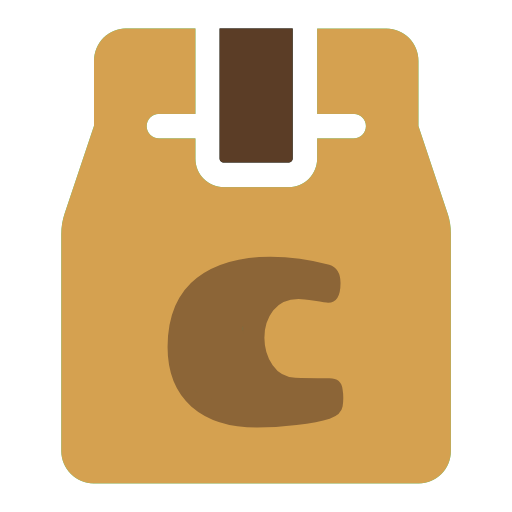
<style>
.page{position:relative;width:512px;height:512px;background:#d5a150}
.page>*{position:absolute;margin:0}
.t1{font:230px "Chango-Regular";color:#8c6537}
</style>
<div class="page">
<p class="t1" style="left:167px;top:256px;width:177px;height:172px">C</p>
</div>
